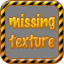
<style>
.page{position:relative;width:64px;height:64px;background:#7f7f7f}
.page>*{position:absolute;margin:0}
.t1{font:16.8px "MarkerFelt-Thin"}
</style>
<div class="page">
<p class="t1" style="left:9px;top:14px;width:46px;height:34px;text-align:center">missing<br>texture</p>
</div>
